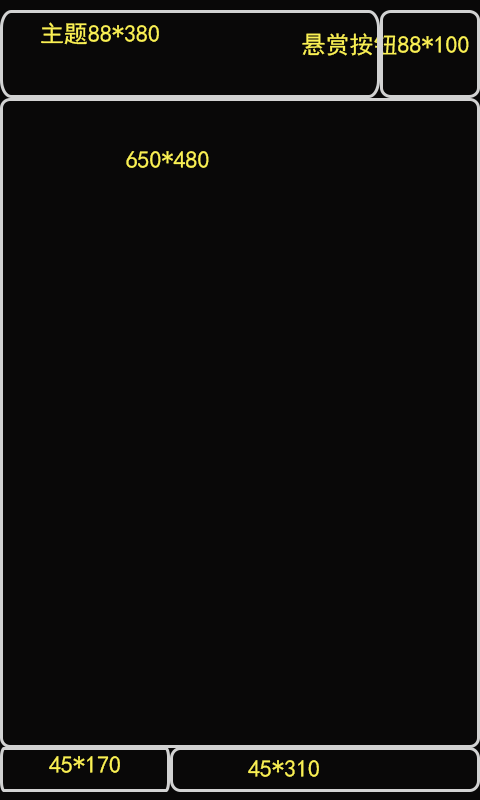
<style>
.page{position:relative;width:480px;height:800px;background:#090808}
.page>*{position:absolute;margin:0}
.t1{font:24px "SimHei";color:#faf054}
</style>
<div class="page">
<p class="t1" style="left:41px;top:22px;width:118px;height:23px">主题88*380</p>
<p class="t1" style="left:302px;top:33px;width:167px;height:23px">悬赏按钮88*100</p>
<p class="t1" style="left:126px;top:151px;width:83px;height:17px">650*480</p>
<p class="t1" style="left:49px;top:756px;width:71px;height:17px">45*170</p>
<p class="t1" style="left:248px;top:760px;width:71px;height:17px">45*310</p>
</div>
